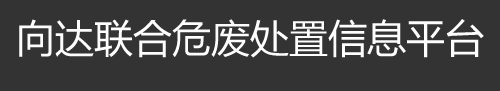
<style>
.page{position:relative;width:500px;height:91px;background:#333333}
.page>*{position:absolute;margin:0}
.t1{font:39px "MicrosoftYaHei";color:#fdfdfd}
</style>
<div class="page">
<p class="t1" style="left:19px;top:19px;width:465px;height:39px">向达联合危废处置信息平台</p>
</div>
